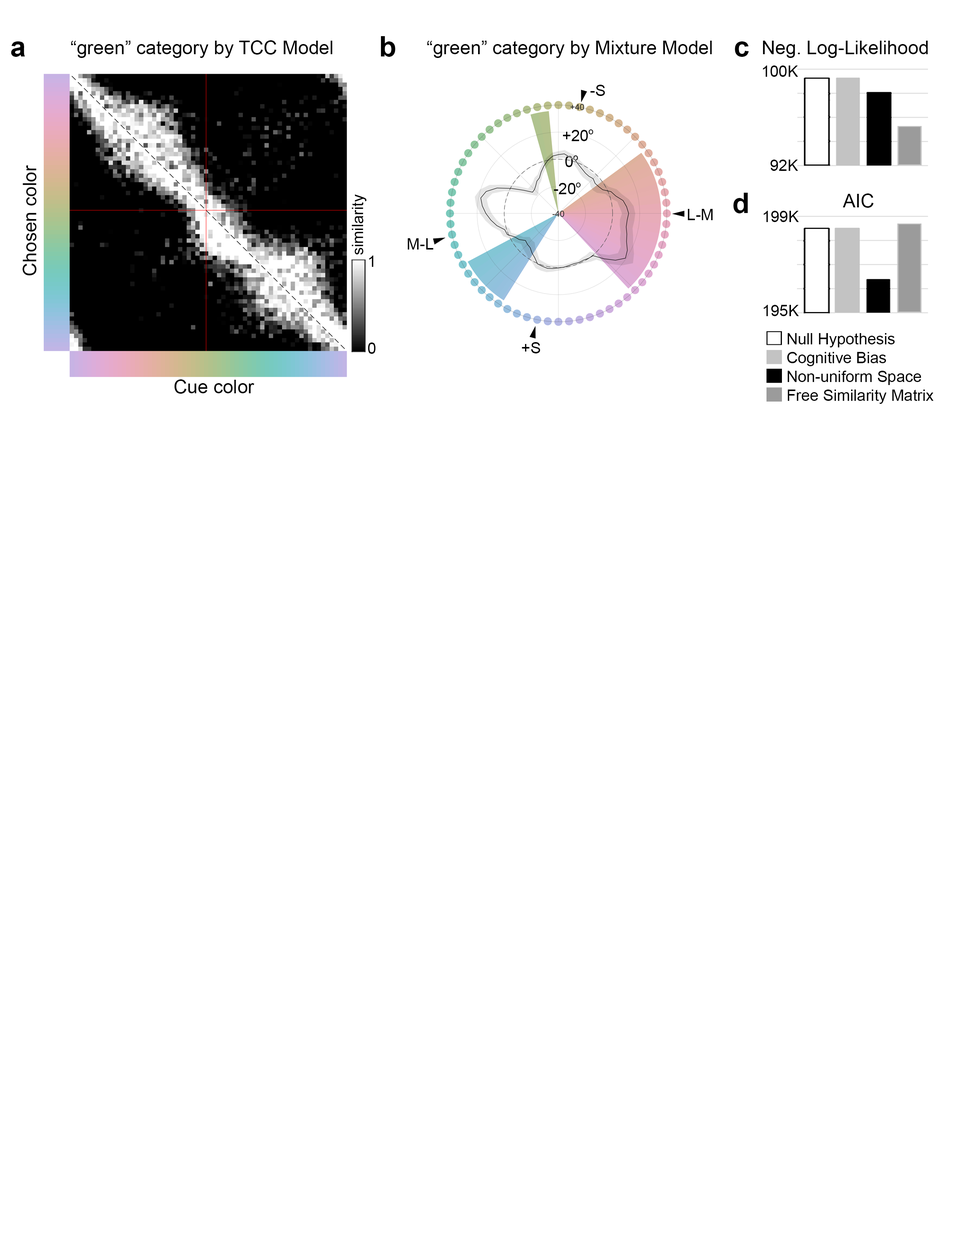
<style>
.page{position:relative;width:960px;height:1242px;background:#ffffff}
.page>*{position:absolute;margin:0}
.t1{font:18.8px "ArialMT";color:#000000}
.t2{font:15.7px "ArialMT";color:#000000}
.t3{font:15.7px/21.8px "ArialMT";color:#000000}
</style>
<div class="page">
<p class="t1" style="left:71px;top:40px;width:261px;height:18px">“green” category by TCC Model</p>
<p class="t1" style="left:427px;top:41px;width:285px;height:17px">“green” category by Mixture Model</p>
<p class="t1" style="left:763px;top:41px;width:165px;height:17px">Neg. Log-Likelihood</p>
<p class="t2" style="left:763px;top:65px;width:35px;height:106px;text-align:right">100K<br><br><br><br><br>92K</p>
<p class="t2" style="left:590px;top:85px;width:15px;height:11px">-S</p>
<p class="t2" style="left:563px;top:129px;width:30px;height:12px">+20o</p>
<p class="t2" style="left:565px;top:155px;width:13px;height:12px">0o</p>
<p class="t1" style="left:23px;top:165px;width:14px;height:111px;rotate:-90deg">Chosen color</p>
<p class="t2" style="left:554px;top:183px;width:27px;height:11px">-20o</p>
<p class="t2" style="left:352px;top:194px;width:15px;height:61px;rotate:-90deg">similarity</p>
<p class="t1" style="left:843px;top:193px;width:31px;height:15px">AIC</p>
<p class="t2" style="left:688px;top:209px;width:25px;height:11px">L-M</p>
<p class="t2" style="left:763px;top:211px;width:36px;height:105px;text-align:right">199K<br><br><br><br><br>195K</p>
<p class="t2" style="left:408px;top:238px;width:25px;height:12px">M-L</p>
<p class="t3" style="left:368px;top:256px;width:8px;height:98px">1<br><br><br><br>0</p>
<p class="t2" style="left:787px;top:333px;width:147px;height:71px">Null Hypothesis<br>Cognitive Bias<br>Non-uniform Space<br>Free Similarity Matrix</p>
<p class="t2" style="left:522px;top:342px;width:18px;height:11px">+S</p>
<p class="t1" style="left:174px;top:379px;width:80px;height:15px">Cue color</p>
</div>
